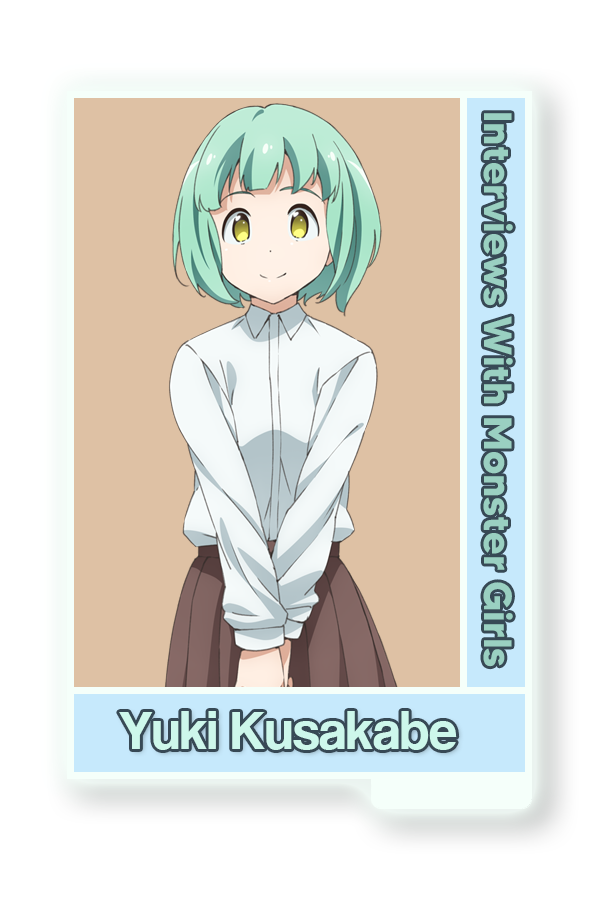
<style>
.page{position:relative;width:600px;height:900px;background:#dec1a4}
.page>*{position:absolute;margin:0}
.t1{font:39.2px "MADETOMMY-Bold";color:#9ad0c1}
.t2{font:56.1px "CoolveticaRg-Regular";color:#cdf7eb}
</style>
<div class="page">
<p class="t1" style="left:483px;top:113px;width:30px;height:554px;rotate:90deg">Interviews With Monster Girls</p>
<p class="t2" style="left:119px;top:711px;width:338px;height:39px">Yuki Kusakabe</p>
</div>
